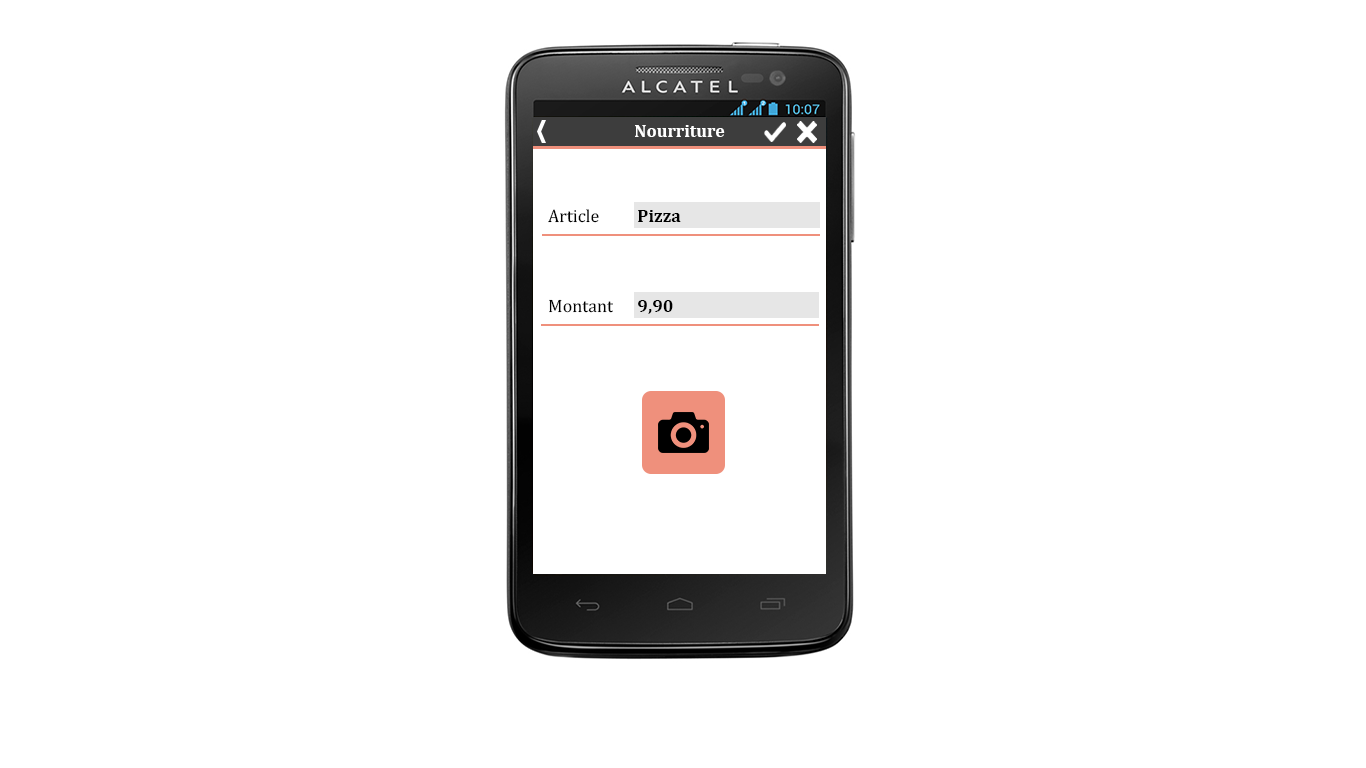
<style>
.page{position:relative;width:1366px;height:768px;background:#ffffff}
.page>*{position:absolute;margin:0}
.t1{font:18px "Cambria-Bold";color:#ffffff}
.t2{font:18px "Cambria";color:#000000}
.t3{font:18px "Cambria-Bold";color:#000000}
</style>
<div class="page">
<p class="t1" style="left:635px;top:125px;width:90px;height:12px">Nourriture</p>
<p class="t2" style="left:548px;top:209px;width:51px;height:14px">Article</p>
<p class="t3" style="left:638px;top:210px;width:43px;height:12px">Pizza</p>
<p class="t2" style="left:549px;top:299px;width:64px;height:14px">Montant</p>
<p class="t3" style="left:638px;top:300px;width:35px;height:14px">9,90</p>
</div>
